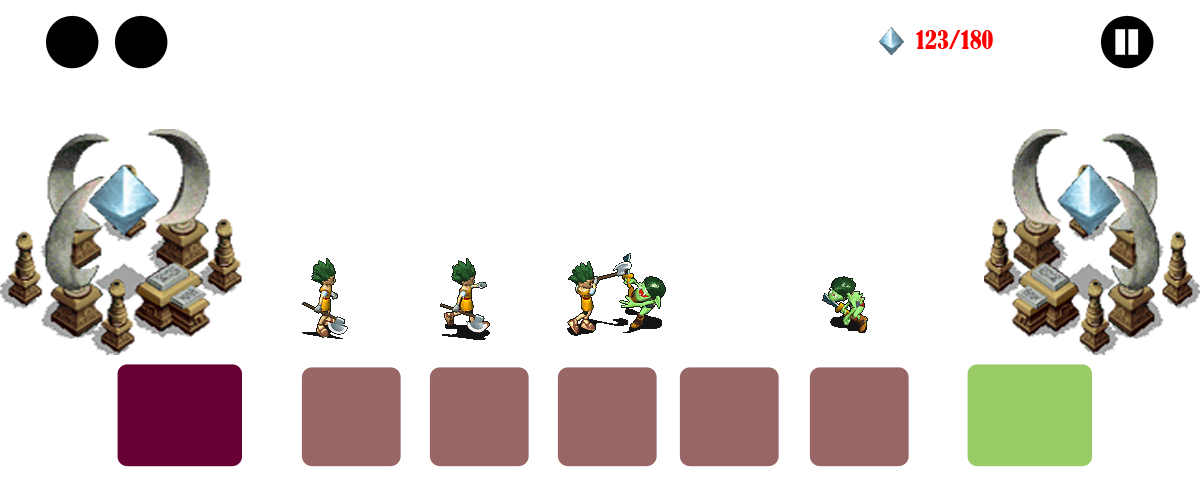
<style>
.page{position:relative;width:1200px;height:480px;background:#ffffff}
.page>*{position:absolute;margin:0}
.t1{font:24px "BernardMT-Condensed";color:#ff0000}
</style>
<div class="page">
<p class="t1" style="left:916px;top:30px;width:77px;height:19px">123/180</p>
</div>
